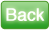
<style>
.page{position:relative;width:50px;height:30px}
.page>*{position:absolute;margin:0}
.t1{font:17px "Helvetica";color:#ffffff;font-weight:bold}
</style>
<div class="page">
<p class="t1" style="left:6px;top:8px;width:39px;height:13px">Back</p>
</div>
